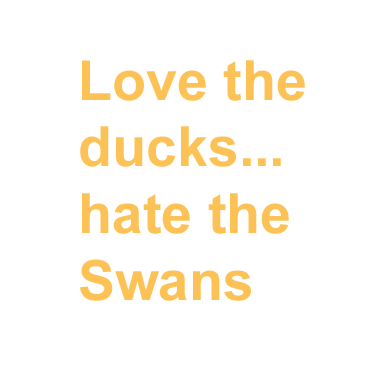
<style>
.page{position:relative;width:390px;height:390px;background:#ffffff}
.page>*{position:absolute;margin:0}
.t1{font:55.6px "Arial-BoldMT";color:#fdc256}
</style>
<div class="page">
<p class="t1" style="left:80px;top:60px;width:225px;height:241px">Love the ducks...<br>hate the Swans</p>
</div>
